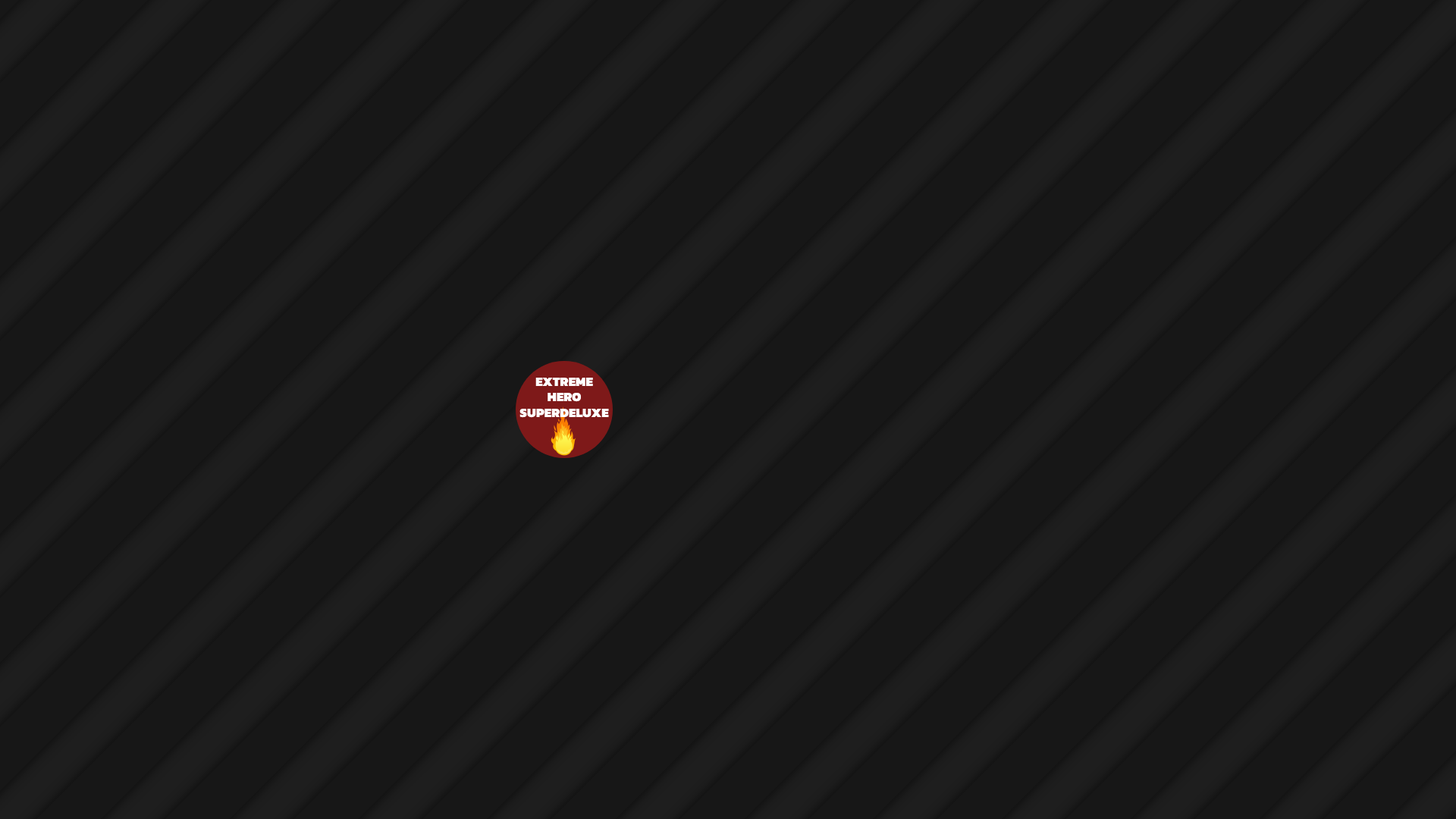
<style>
.page{position:relative;width:1456px;height:819px;background:#171717}
.page>*{position:absolute;margin:0}
.t1{font:12.9px "Kanit-Black";color:#ffffff}
</style>
<div class="page">
<p class="t1" style="left:519px;top:378px;width:90px;height:40px;text-align:center">EXTREME<br>HERO<br>SUPERDELUXE</p>
</div>
